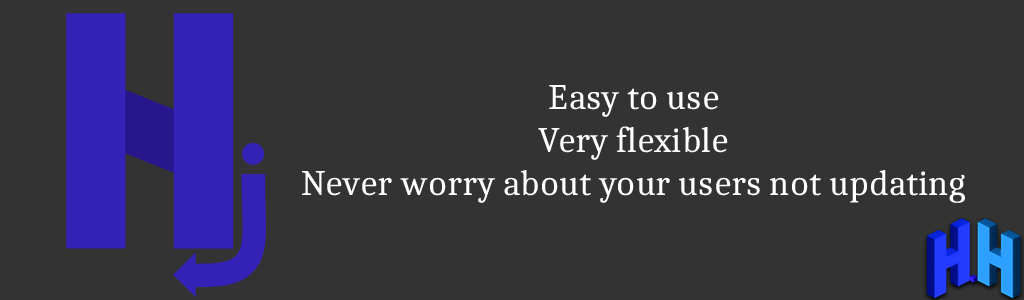
<style>
.page{position:relative;width:1024px;height:300px;background:#333333}
.page>*{position:absolute;margin:0}
.t1{font:36px "Caladea-Regular";color:#ffffff}
</style>
<div class="page">
<p class="t1" style="left:302px;top:85px;width:663px;height:118px;text-align:center">Easy to use<br>Very flexible<br>Never worry about your users not updating</p>
</div>
